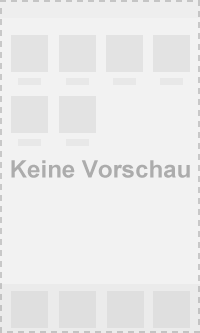
<style>
.page{position:relative;width:200px;height:333px;background:#f2f2f2}
.page>*{position:absolute;margin:0}
.t1{font:24px "Arial-BoldMT";color:#acacac}
</style>
<div class="page">
<p class="t1" style="left:11px;top:160px;width:179px;height:18px">Keine Vorschau</p>
</div>
